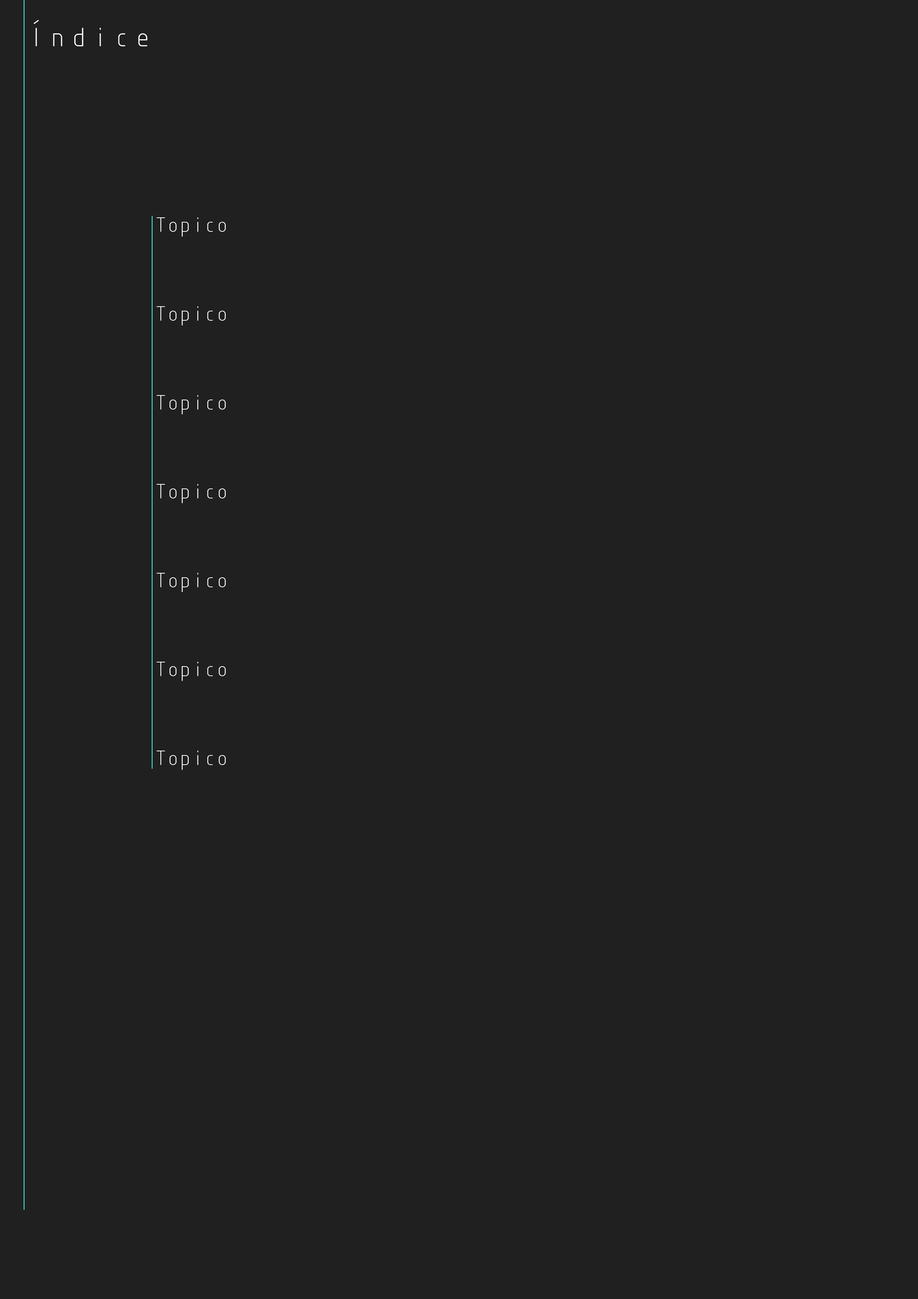
<style>
.page{position:relative;width:918px;height:1299px;background:#202020}
.page>*{position:absolute;margin:0}
.t1{font:27.8px "SWIsot1";color:#ffffff}
.t2{font:21.6px "SWIsot1";letter-spacing:-0.2em;color:#ffffff}
</style>
<div class="page">
<p class="t1" style="left:34px;top:20px;width:113px;height:26px">Índice</p>
<p class="t2" style="left:157px;top:217px;width:69px;height:20px">Topico</p>
<p class="t2" style="left:157px;top:306px;width:69px;height:19px">Topico</p>
<p class="t2" style="left:157px;top:395px;width:69px;height:19px">Topico</p>
<p class="t2" style="left:157px;top:484px;width:69px;height:19px">Topico</p>
<p class="t2" style="left:157px;top:573px;width:69px;height:19px">Topico</p>
<p class="t2" style="left:157px;top:662px;width:69px;height:19px">Topico</p>
<p class="t2" style="left:157px;top:750px;width:69px;height:20px">Topico</p>
</div>
